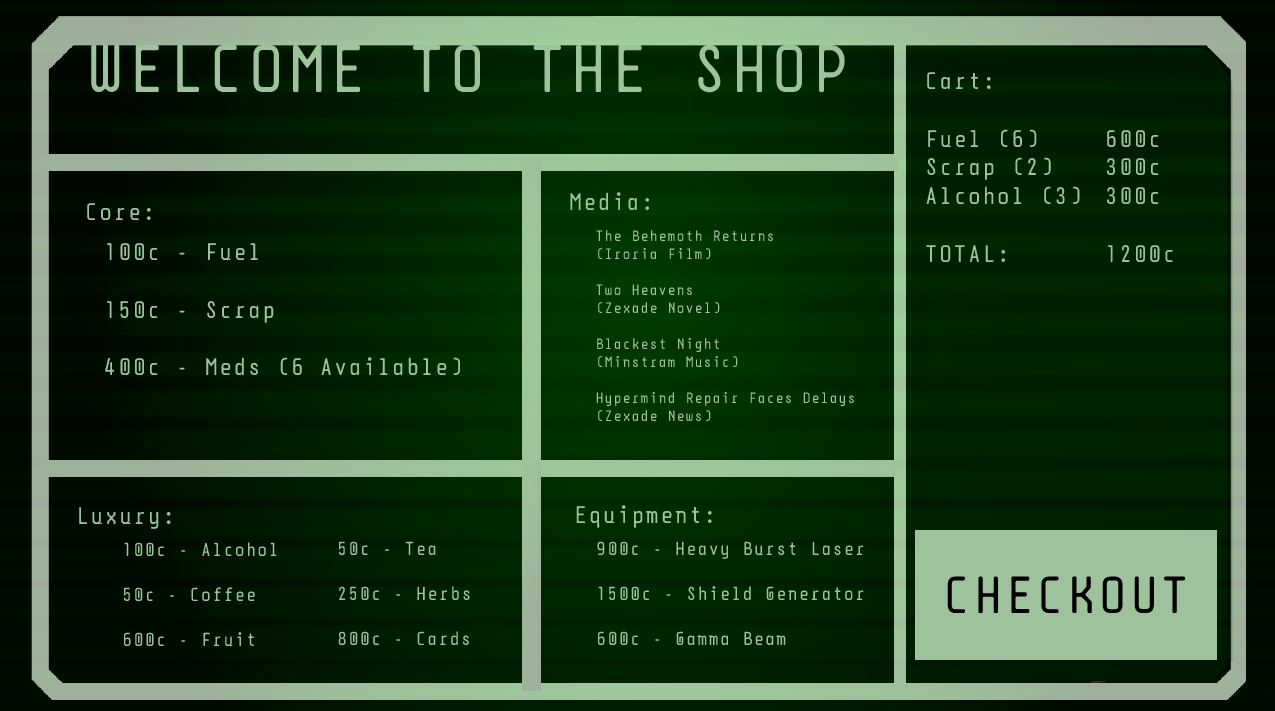
<style>
.page{position:relative;width:1275px;height:711px}
.page>*{position:absolute;margin:0}
.t1{font:67.1px "DPSDbeyond";color:#9ec29c}
.t2{font:24px "DPSDbeyond";color:#9ec29c}
.t3{font:15px "DPSDbeyond";color:#9ec29c}
.t4{font:6px "DPSDbeyond";color:#9ec29c}
.t5{font:18.8px "DPSDbeyond";color:#9ec29c}
.t6{font:19px "DPSDbeyond";color:#9ec29c}
.t7{font:52px "DPSDbeyond";color:#000000}
</style>
<div class="page">
<p class="t1" style="left:91px;top:44px;width:754px;height:49px">WELCOME TO THE SHOP</p>
<p class="t2" style="left:926px;top:72px;width:154px;height:190px">Cart:<br><br>Fuel (6)<br>Scrap (2)<br>Alcohol (3)<br><br>TOTAL:</p>
<p class="t2" style="left:1107px;top:130px;width:66px;height:132px">600c<br>300c<br>300c<br><br>1200c</p>
<p class="t2" style="left:570px;top:192px;width:80px;height:19px">Media:</p>
<p class="t2" style="left:87px;top:203px;width:64px;height:17px">Core:</p>
<p class="t3" style="left:596px;top:230px;width:258px;height:192px"><span class="t4"><br><br></span>The Behemoth Returns<br>(Iroria Film)<br><br>Two Heavens<br>(Zexade Novel)<br><br>Blackest Night<br>(Minstram Music)<br><br>Hypermind Repair Faces Delays<br>(Zexade News)</p>
<p class="t2" style="left:105px;top:243px;width:356px;height:133px">100c - Fuel<br><br>150c - Scrap<br><br>400c - Meds (6 Available)</p>
<p class="t2" style="left:79px;top:507px;width:92px;height:22px">Luxury:</p>
<p class="t2" style="left:576px;top:505px;width:136px;height:23px">Equipment:</p>
<p class="t5" style="left:123px;top:542px;width:154px;height:105px">100c - Alcohol<br><br>50c - Coffee<br><br>600c - Fruit</p>
<p class="t5" style="left:338px;top:541px;width:132px;height:105px">50c - Tea<br><br>250c - <span class="t6">Herbs<br><br></span>800c - Cards</p>
<p class="t5" style="left:597px;top:541px;width:267px;height:105px">900c - Heavy Burst Laser<br><br>1500c - Shield Generator<br><br>600c - Gamma Beam</p>
<p class="t7" style="left:947px;top:576px;width:239px;height:37px">CHECKOUT</p>
</div>
